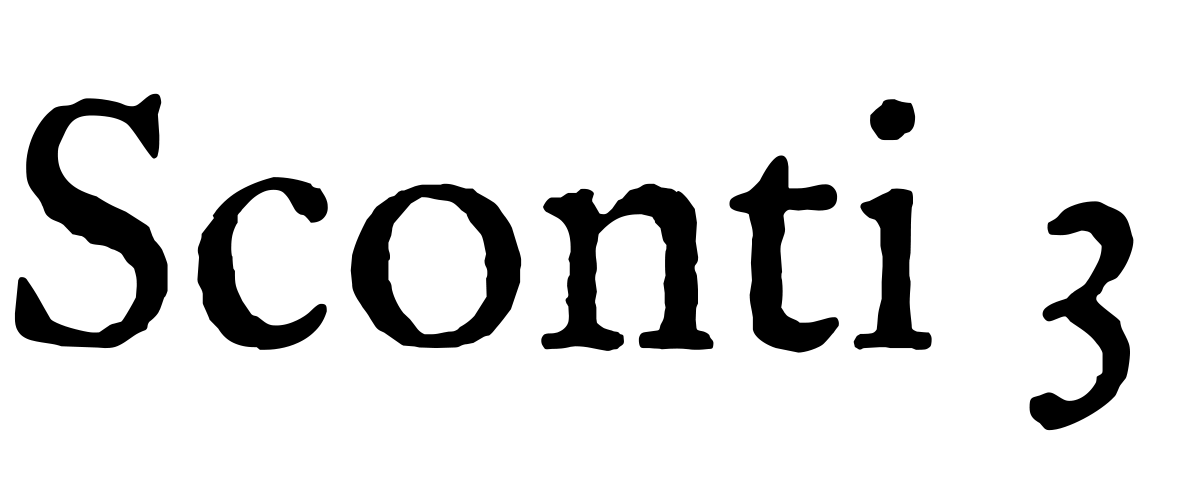
<style>
.page{position:relative;width:1200px;height:500px;background:#ffffff}
.page>*{position:absolute;margin:0}
.t1{font:360px "IM_FELL_English_Roman";color:#000000}
</style>
<div class="page">
<p class="t1" style="left:14px;top:93px;width:1120px;height:338px">Sconti 3</p>
</div>
